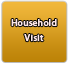
<style>
.page{position:relative;width:69px;height:64px}
.page>*{position:absolute;margin:0}
.t1{font:9.3px/14.4px "MyriadPro-Semibold";color:#fee7e7;font-weight:bold}
</style>
<div class="page">
<p class="t1" style="left:11px;top:19px;width:46px;height:23px;text-align:center">Household<br>Visit</p>
</div>
